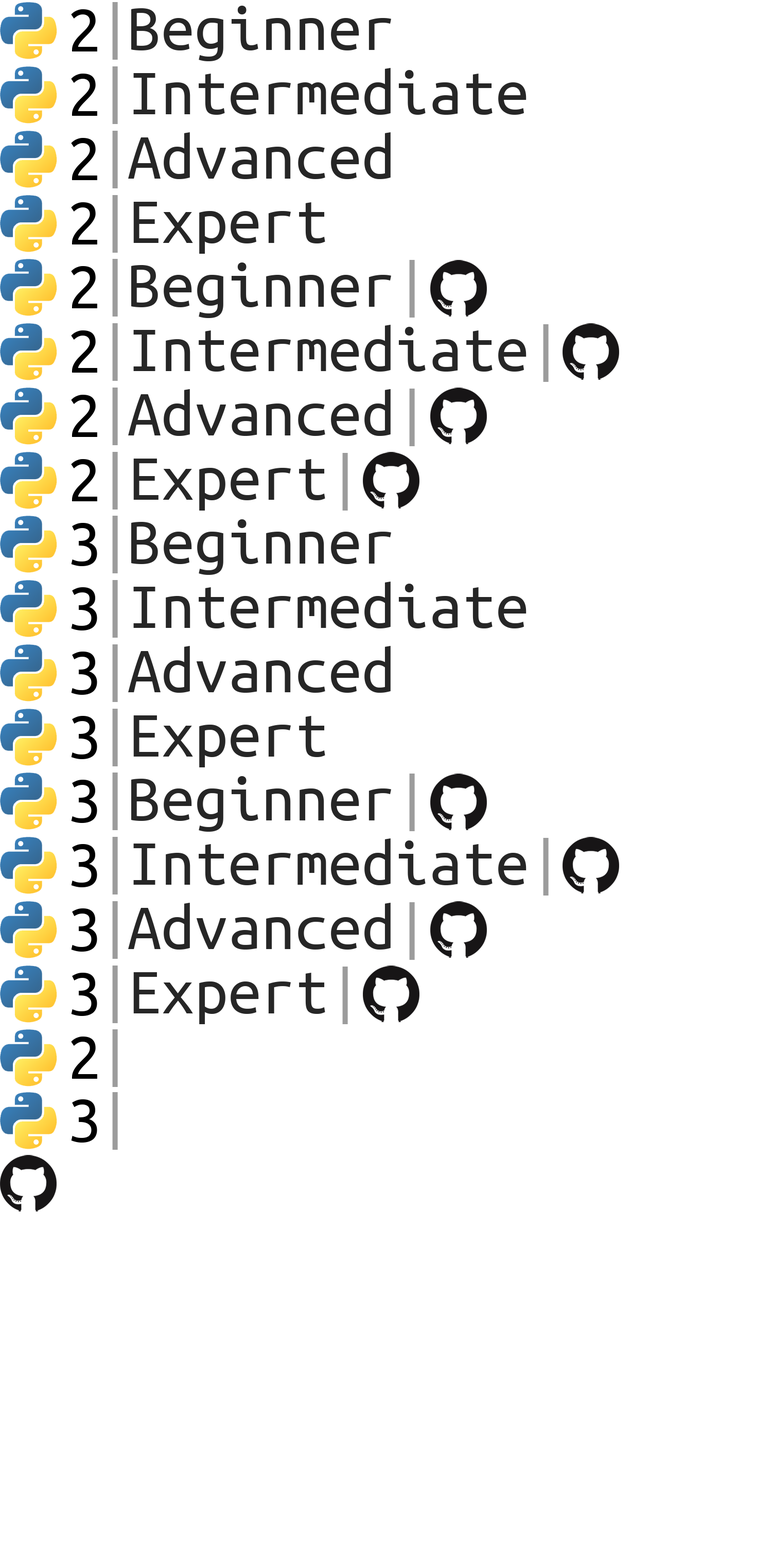
<style>
.page{position:relative;width:772px;height:1544px;background:#ffffff}
.page>*{position:absolute;margin:0}
.t1{font:66.9px "UbuntuMono-Regular";color:#9c9c9c}
.t2{font:66.9px "UbuntuMono-Regular";color:#262626}
.t3{font:66.9px "UbuntuMono-Regular";color:#000000}
</style>
<div class="page">
<p class="t1" style="left:112px;top:2px;width:6px;height:58px">|</p>
<p class="t2" style="left:131px;top:6px;width:260px;height:55px">Beginner</p>
<p class="t3" style="left:71px;top:9px;width:26px;height:42px">2</p>
<p class="t3" style="left:71px;top:74px;width:26px;height:42px">2</p>
<p class="t1" style="left:112px;top:66px;width:6px;height:58px">|</p>
<p class="t2" style="left:133px;top:68px;width:394px;height:47px">Intermediate</p>
<p class="t3" style="left:71px;top:138px;width:26px;height:42px">2</p>
<p class="t1" style="left:112px;top:131px;width:6px;height:57px">|</p>
<p class="t2" style="left:128px;top:132px;width:263px;height:47px">Advanced</p>
<p class="t1" style="left:112px;top:195px;width:6px;height:58px">|</p>
<p class="t3" style="left:71px;top:202px;width:26px;height:43px">2</p>
<p class="t2" style="left:133px;top:202px;width:192px;height:52px">Expert</p>
<p class="t3" style="left:71px;top:266px;width:26px;height:42px">2</p>
<p class="t1" style="left:112px;top:259px;width:6px;height:58px">|</p>
<p class="t2" style="left:131px;top:263px;width:260px;height:55px">Beginner</p>
<p class="t1" style="left:409px;top:260px;width:6px;height:58px">|</p>
<p class="t1" style="left:112px;top:323px;width:6px;height:58px">|</p>
<p class="t2" style="left:133px;top:325px;width:394px;height:47px">Intermediate</p>
<p class="t1" style="left:543px;top:324px;width:6px;height:58px">|</p>
<p class="t3" style="left:71px;top:330px;width:26px;height:43px">2</p>
<p class="t1" style="left:112px;top:388px;width:6px;height:57px">|</p>
<p class="t2" style="left:128px;top:389px;width:263px;height:47px">Advanced</p>
<p class="t1" style="left:409px;top:389px;width:6px;height:57px">|</p>
<p class="t3" style="left:71px;top:395px;width:26px;height:42px">2</p>
<p class="t3" style="left:71px;top:459px;width:26px;height:42px">2</p>
<p class="t1" style="left:112px;top:452px;width:6px;height:58px">|</p>
<p class="t2" style="left:133px;top:459px;width:192px;height:52px">Expert</p>
<p class="t1" style="left:342px;top:453px;width:6px;height:58px">|</p>
<p class="t1" style="left:112px;top:516px;width:6px;height:57px">|</p>
<p class="t2" style="left:131px;top:519px;width:260px;height:56px">Beginner</p>
<p class="t3" style="left:71px;top:523px;width:26px;height:43px">3</p>
<p class="t1" style="left:112px;top:580px;width:6px;height:58px">|</p>
<p class="t2" style="left:133px;top:582px;width:394px;height:47px">Intermediate</p>
<p class="t3" style="left:71px;top:587px;width:26px;height:44px">3</p>
<p class="t3" style="left:71px;top:652px;width:26px;height:43px">3</p>
<p class="t1" style="left:112px;top:644px;width:6px;height:58px">|</p>
<p class="t2" style="left:128px;top:646px;width:263px;height:47px">Advanced</p>
<p class="t1" style="left:112px;top:709px;width:6px;height:57px">|</p>
<p class="t3" style="left:71px;top:716px;width:26px;height:43px">3</p>
<p class="t2" style="left:133px;top:716px;width:192px;height:52px">Expert</p>
<p class="t1" style="left:112px;top:773px;width:6px;height:57px">|</p>
<p class="t1" style="left:409px;top:774px;width:6px;height:57px">|</p>
<p class="t3" style="left:71px;top:780px;width:26px;height:43px">3</p>
<p class="t2" style="left:131px;top:776px;width:260px;height:56px">Beginner</p>
<p class="t3" style="left:71px;top:844px;width:26px;height:43px">3</p>
<p class="t1" style="left:112px;top:837px;width:6px;height:58px">|</p>
<p class="t2" style="left:133px;top:839px;width:394px;height:46px">Intermediate</p>
<p class="t1" style="left:543px;top:838px;width:6px;height:58px">|</p>
<p class="t1" style="left:112px;top:901px;width:6px;height:58px">|</p>
<p class="t2" style="left:128px;top:903px;width:263px;height:47px">Advanced</p>
<p class="t1" style="left:409px;top:902px;width:6px;height:58px">|</p>
<p class="t3" style="left:71px;top:909px;width:26px;height:43px">3</p>
<p class="t1" style="left:112px;top:966px;width:6px;height:57px">|</p>
<p class="t3" style="left:71px;top:973px;width:26px;height:43px">3</p>
<p class="t2" style="left:133px;top:972px;width:192px;height:52px">Expert</p>
<p class="t1" style="left:342px;top:967px;width:6px;height:57px">|</p>
<p class="t3" style="left:71px;top:1037px;width:26px;height:42px">2</p>
<p class="t1" style="left:112px;top:1030px;width:6px;height:57px">|</p>
<p class="t1" style="left:112px;top:1092px;width:6px;height:58px">|</p>
<p class="t3" style="left:71px;top:1100px;width:26px;height:43px">3</p>
</div>
